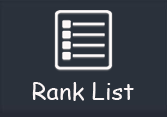
<style>
.page{position:relative;width:167px;height:117px;background:#2a313b}
.page>*{position:absolute;margin:0}
.t1{font:24px "ComicSansMS";color:#fbf5f5}
</style>
<div class="page">
<p class="t1" style="left:32px;top:82px;width:102px;height:19px">Rank List</p>
</div>
